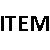
<style>
.page{position:relative;width:50px;height:50px;background:#ffffff}
.page>*{position:absolute;margin:0}
.t1{font:24px "Calibri-Bold";color:#000000}
</style>
<div class="page">
<p class="t1" style="left:1px;top:16px;width:48px;height:15px">ITEM</p>
</div>
